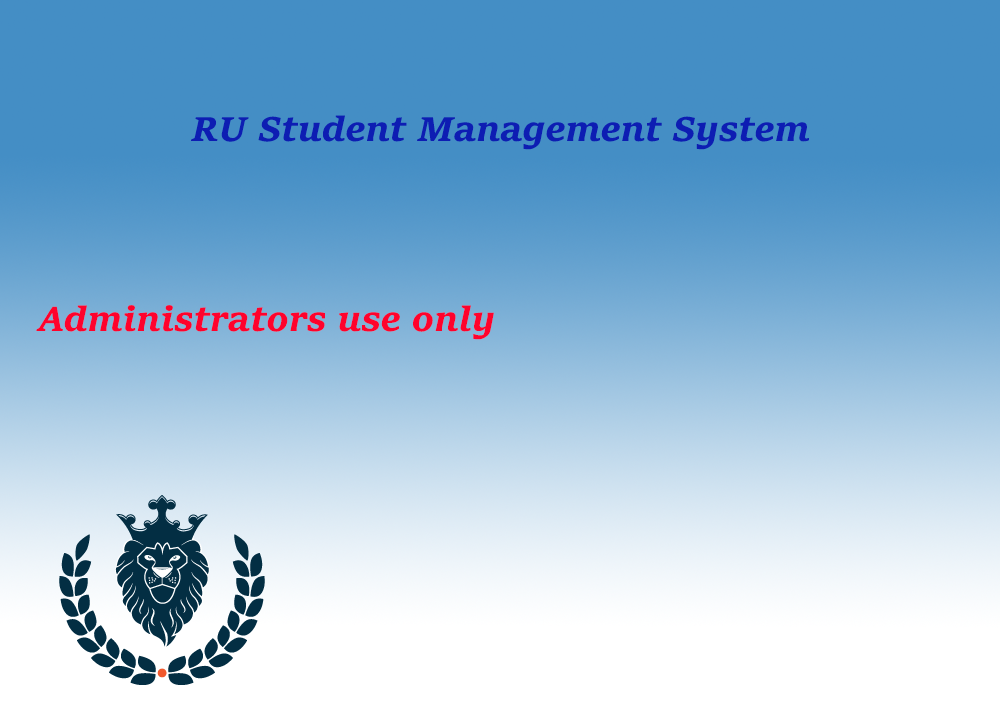
<style>
.page{position:relative;width:1000px;height:720px}
.page>*{position:absolute;margin:0}
.t1{font:36px "SitkaSmall-BoldItalic";color:#0d1db3}
.t2{font:36px "SitkaSmall-BoldItalic";color:#ff022c}
</style>
<div class="page">
<p class="t1" style="left:191px;top:115px;width:618px;height:35px">RU Student Management System</p>
<p class="t2" style="left:36px;top:305px;width:458px;height:35px">Administrators use only</p>
</div>
